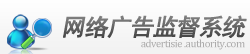
<style>
.page{position:relative;width:250px;height:54px}
.page>*{position:absolute;margin:0}
.t1{font:24px "SimHei";letter-spacing:-0.075em;font-weight:bold;font-style:italic}
.t2{font:11px "CambriaMath";letter-spacing:-0.05em;color:#adacac}
</style>
<div class="page">
<p class="t1" style="left:63px;top:15px;width:184px;height:23px">网络广告监督系统</p>
<p class="t2" style="left:141px;top:39px;width:104px;height:11px">advertisie .authority.com</p>
</div>
